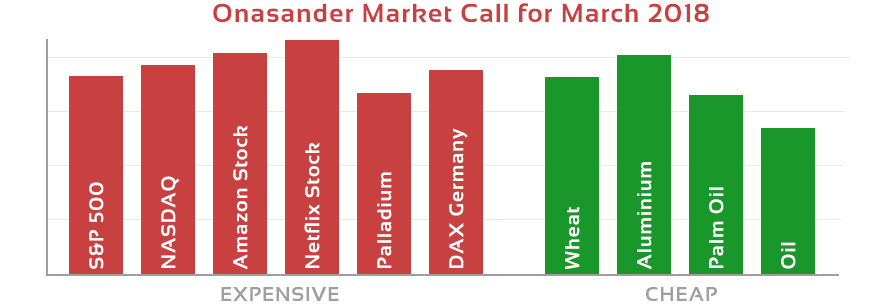
<style>
.page{position:relative;width:876px;height:308px;background:#ffffff}
.page>*{position:absolute;margin:0}
.t1{font:26px "Sansation-Bold";letter-spacing:0.05em;color:#c84040}
.t2{font:20px "Sansation-Bold";letter-spacing:0.05em;color:#ffffff}
.t3{font:20px "Sansation-Bold";letter-spacing:0.05em;color:#9f9fa0}
</style>
<div class="page">
<p class="t1" style="left:213px;top:3px;width:496px;height:19px">Onasander Market Call for March 2018</p>
<p class="t2" style="left:233px;top:125px;width:15px;height:145px;rotate:-90deg">Amazon Stock</p>
<p class="t2" style="left:449px;top:128px;width:19px;height:140px;rotate:-90deg">DAX Germany</p>
<p class="t2" style="left:304px;top:142px;width:16px;height:126px;rotate:-90deg">Netflix Stock</p>
<p class="t2" style="left:377px;top:172px;width:15px;height:96px;rotate:-90deg">Palladium</p>
<p class="t2" style="left:637px;top:162px;width:15px;height:108px;rotate:-90deg">Aluminium</p>
<p class="t2" style="left:89px;top:182px;width:15px;height:87px;rotate:-90deg">S&amp;P 500</p>
<p class="t2" style="left:161px;top:176px;width:19px;height:92px;rotate:-90deg">NASDAQ</p>
<p class="t2" style="left:709px;top:187px;width:15px;height:81px;rotate:-90deg">Palm Oil</p>
<p class="t2" style="left:565px;top:207px;width:15px;height:63px;rotate:-90deg">Wheat</p>
<p class="t2" style="left:781px;top:242px;width:15px;height:27px;rotate:-90deg">Oil</p>
<p class="t3" style="left:221px;top:287px;width:118px;height:14px">EXPENSIVE</p>
<p class="t3" style="left:646px;top:287px;width:71px;height:14px">CHEAP</p>
</div>
